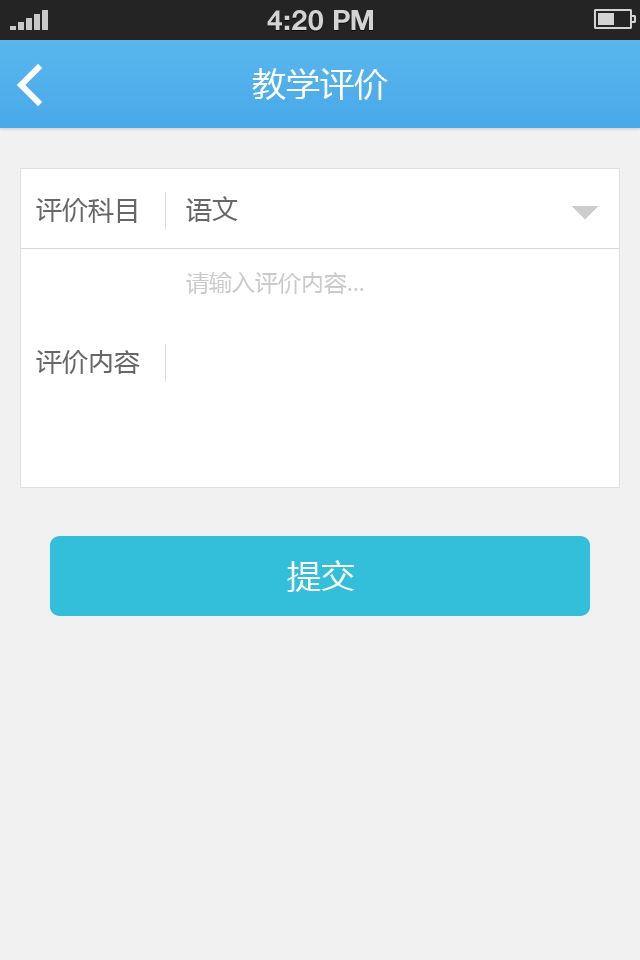
<style>
.page{position:relative;width:640px;height:960px;background:#f1f1f1}
.page>*{position:absolute;margin:0}
.t1{font:28px "HelveticaNeueLTStd-Bd";color:#d3d3d3;text-transform:uppercase}
.t2{font:34px "MicrosoftYaHei";color:#ffffff}
.t3{font:26px "MicrosoftYaHei";color:#676767}
.t4{font:23px "MicrosoftYaHei";color:#cbcaca}
</style>
<div class="page">
<p class="t1" style="left:267px;top:10px;width:106px;height:21px">4:20 PM</p>
<p class="t2" style="left:252px;top:68px;width:136px;height:32px">教学评价</p>
<p class="t3" style="left:36px;top:198px;width:101px;height:25px">评价科目</p>
<p class="t3" style="left:186px;top:196px;width:52px;height:26px">语文</p>
<p class="t4" style="left:186px;top:272px;width:178px;height:22px">请输入评价内容...</p>
<p class="t3" style="left:36px;top:350px;width:104px;height:24px">评价内容</p>
<p class="t2" style="left:287px;top:560px;width:68px;height:32px">提交</p>
</div>
